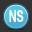
<style>
.page{position:relative;width:32px;height:32px;background:#333333}
.page>*{position:absolute;margin:0}
.t1{font:16.2px "Arial-BoldMT";letter-spacing:-0.04em;color:#ffffff;scale:0.71 1}
</style>
<div class="page">
<p class="t1" style="left:9px;top:10px;width:15px;height:12px">NS</p>
</div>
